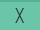
<style>
.page{position:relative;width:40px;height:30px;background:#6ac5a9}
.page>*{position:absolute;margin:0}
.t1{font:30px "Simplifica";color:#333333}
</style>
<div class="page">
<p class="t1" style="left:15px;top:8px;width:10px;height:15px">x</p>
</div>
